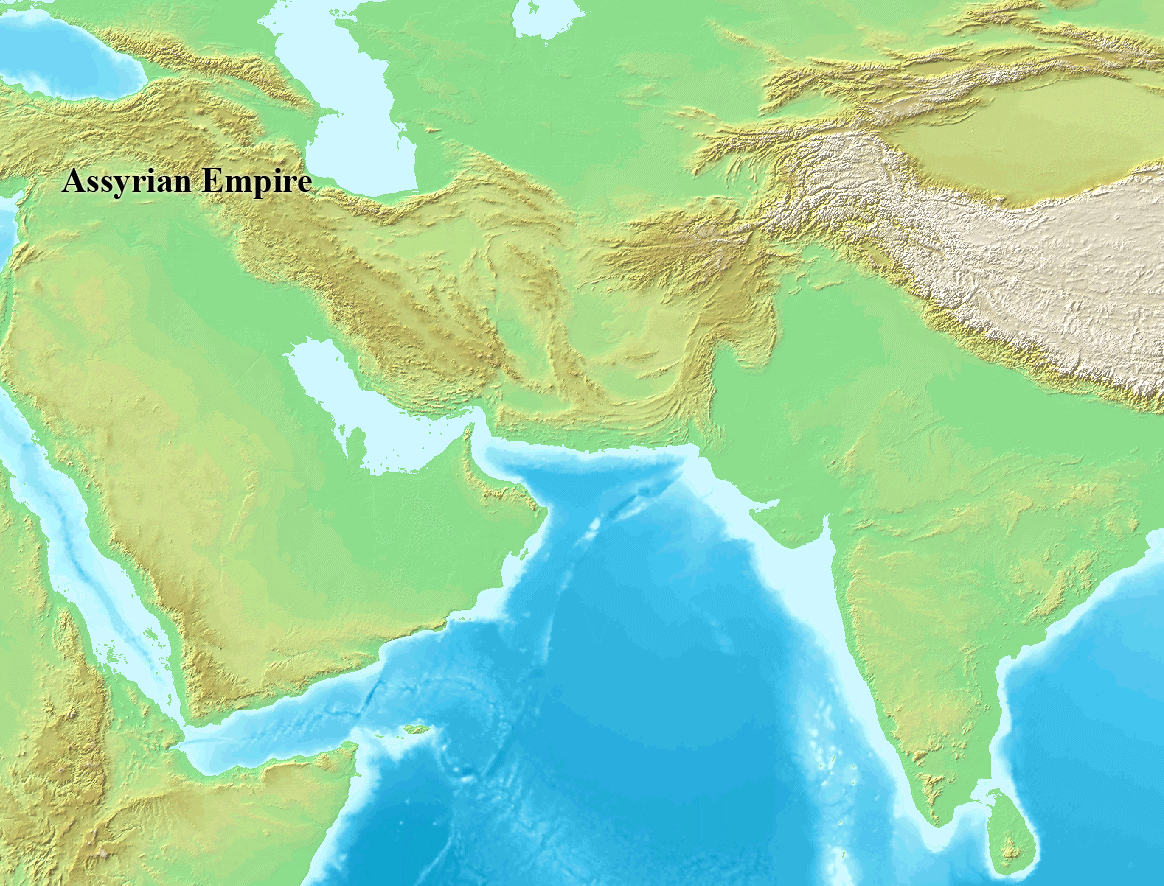
<style>
.page{position:relative;width:1164px;height:886px}
.page>*{position:absolute;margin:0}
.t1{font:34.8px "TimesNewRomanPS-BoldMT";color:#000000}
</style>
<div class="page">
<p class="t1" style="left:61px;top:168px;width:251px;height:31px">Assyrian Empire</p>
</div>
